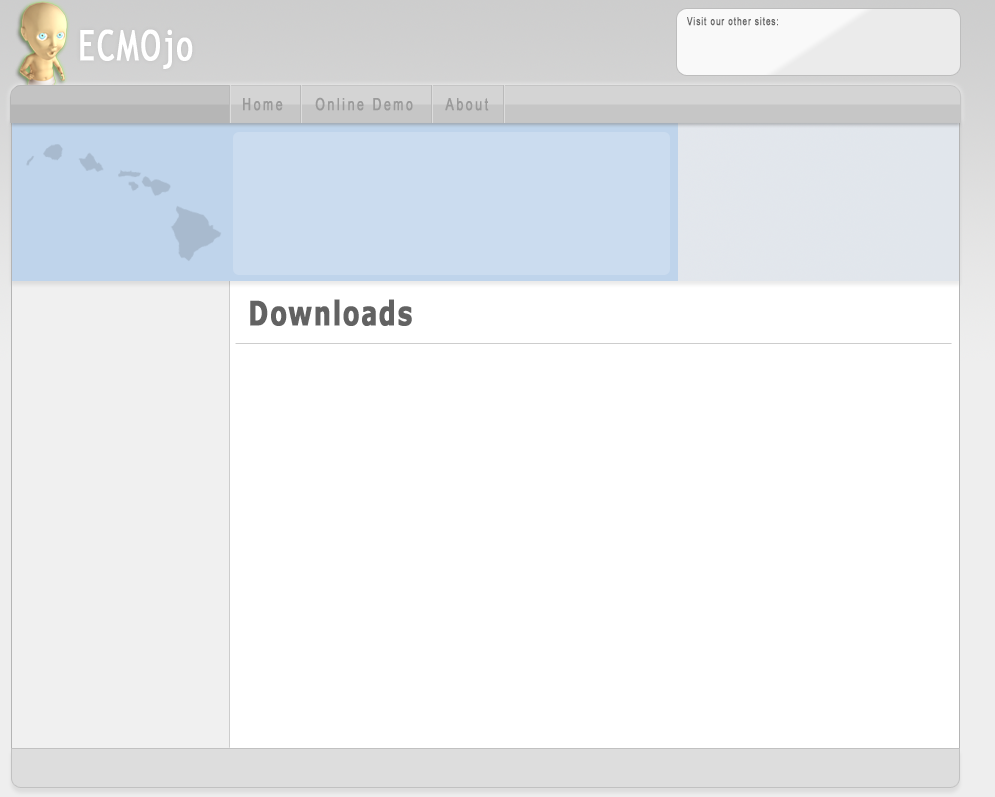
<style>
.page{position:relative;width:995px;height:797px;background:#ffffff}
.page>*{position:absolute;margin:0}
.t1{font:11.2px "ArialMT";letter-spacing:0.1em;color:#666666;font-weight:bold;scale:0.71 1}
.t2{font:42px "TrebuchetMS";letter-spacing:0.05em;color:#ffffff;font-weight:bold;scale:0.71 1}
.t3{font:16.8px "ArialMT";letter-spacing:0.2em;color:#9a9a9a;font-weight:bold;scale:0.71 1}
</style>
<div class="page">
<p class="t1" style="left:687px;top:17px;width:91px;height:9px">Visit our other sites:</p>
<p class="t2" style="left:80px;top:29px;width:113px;height:40px">ECMOjo</p>
<p class="t3" style="left:243px;top:97px;width:246px;height:14px">Home     Online Demo     About</p>
</div>
